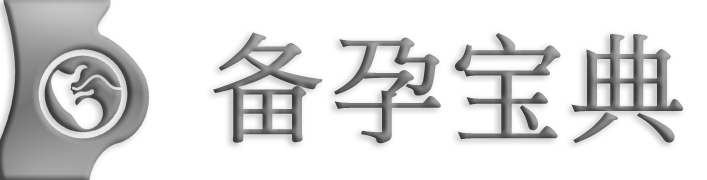
<style>
.page{position:relative;width:707px;height:180px;background:#ffffff}
.page>*{position:absolute;margin:0}
.t1{font:120px "SimSong-Bold"}
</style>
<div class="page">
<p class="t1" style="left:213px;top:32px;width:471px;height:112px">备孕宝典</p>
</div>
